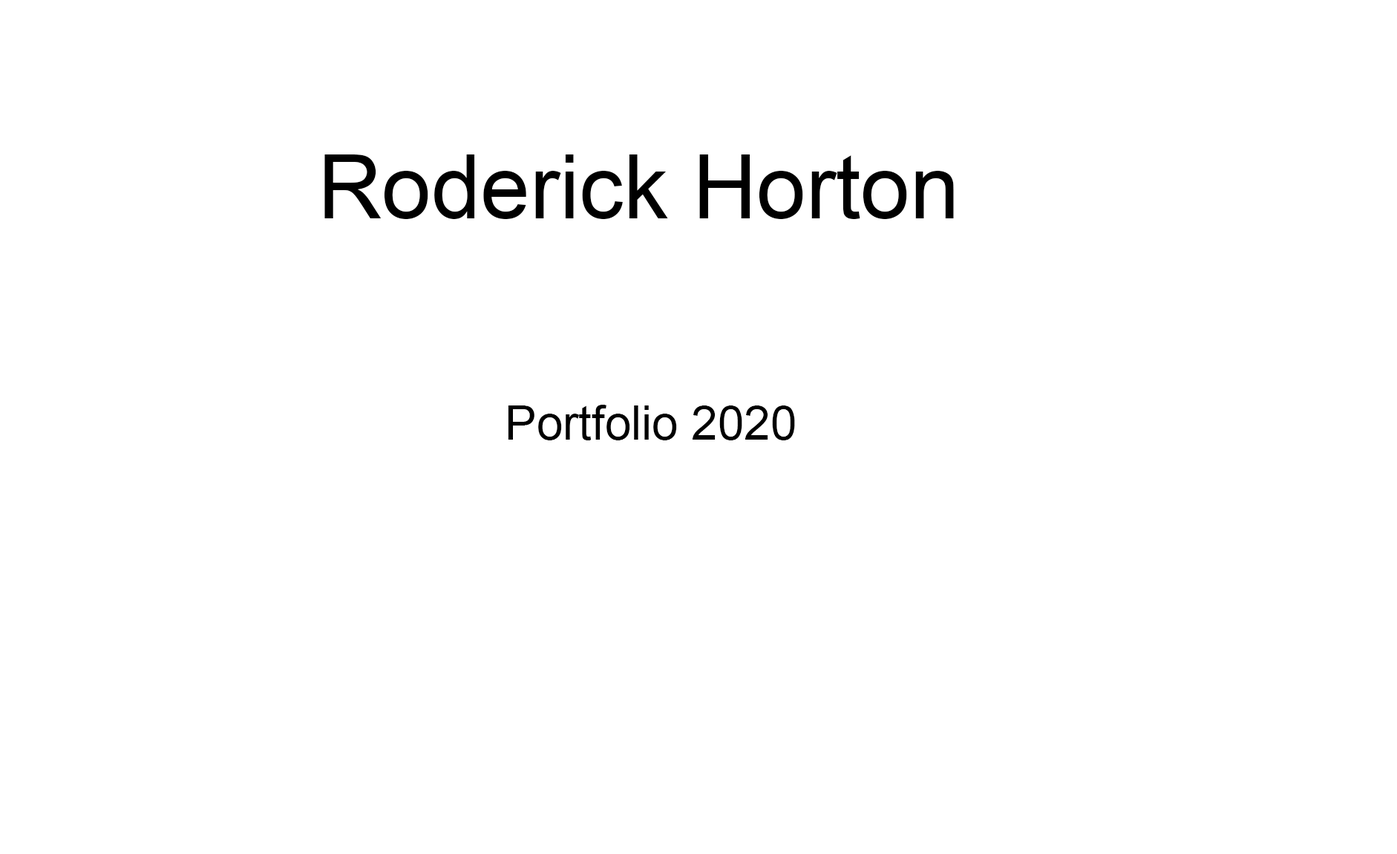
<style>
.page{position:relative;width:1397px;height:854px;background:#ffffff}
.page>*{position:absolute;margin:0}
.t1{font:88.8px "ArialMT";color:#000000}
.t2{font:47.3px "ArialMT";color:#000000}
</style>
<div class="page">
<p class="t1" style="left:324px;top:154px;width:630px;height:65px">Roderick Horton</p>
<p class="t2" style="left:508px;top:405px;width:287px;height:35px">Portfolio 2020</p>
</div>
